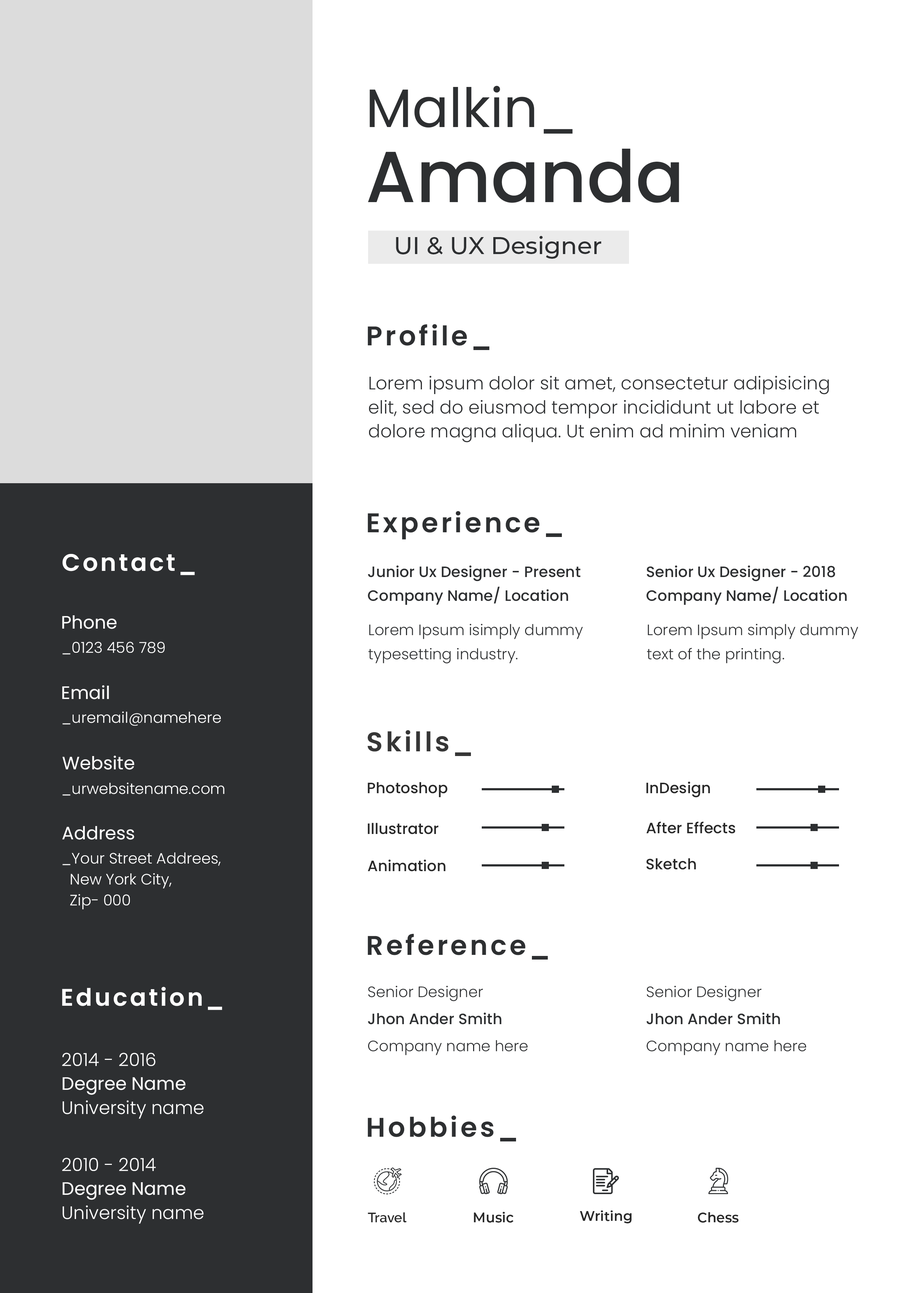
<style>
.page{position:relative;width:922px;height:1293px;background:#ffffff}
.page>*{position:absolute;margin:0}
.t1{font:54.1px/75.2px "Poppins-Regular";color:#2d2f31}
.t2{font:72.2px/75.2px "Poppins-Medium";color:#2d2f31}
.t3{font:24.1px "Montserrat-Medium";color:#2d2f31}
.t4{font:27.1px "Poppins-SemiBold";letter-spacing:0.1em;color:#2d2f31}
.t5{font:18px/24.1px "Poppins-Light";color:#2d2f31}
.t6{font:24.1px "Poppins-SemiBold";letter-spacing:0.1em;color:#ffffff}
.t7{font:15px/24.1px "Poppins-Medium";color:#2d2f31}
.t8{font:15px/24.1px "Poppins-Medium";color:#2d2f31;text-transform:uppercase}
.t9{font:18px "Poppins-Regular";color:#ffffff}
.t10{font:15px/24.1px "Poppins-Light";color:#2d2f31}
.t11{font:15px "Poppins-Light";color:#ffffff}
.t12{font:27.1px "Poppins-SemiBold";letter-spacing:0.1em;color:#363636}
.t13{font:15px "Poppins-Medium";color:#282828}
.t14{font:15px/21.1px "Poppins-Light";color:#ffffff}
.t15{font:15px/27.1px "Poppins-Light";color:#2d2f31}
.t16{font:15px/27.1px "Poppins-Medium";color:#2d2f31}
.t17{font:18px/24.1px "Poppins-Light";color:#fefefe}
.t18{font:18px/24.1px "Poppins-Regular";color:#fefefe}
.t19{font:13.5px "Raleway-SemiBold";color:#282828}
.t20{font:13.5px "Montserrat-SemiBold";color:#282828}
</style>
<div class="page">
<p class="t1" style="left:368px;top:86px;width:311px;height:117px">Malkin_<br><span class="t2">Amanda</span></p>
<p class="t3" style="left:396px;top:236px;width:205px;height:23px">UI &amp; UX Designer</p>
<p class="t4" style="left:368px;top:324px;width:121px;height:26px">Profile_</p>
<p class="t5" style="left:369px;top:376px;width:460px;height:66px">Lorem ipsum dolor sit amet, consectetur adipisicing elit, sed do eiusmod tempor incididunt ut labore et dolore magna aliqua. Ut enim ad minim veniam</p>
<p class="t4" style="left:368px;top:511px;width:194px;height:29px">Experience_</p>
<p class="t6" style="left:62px;top:554px;width:133px;height:21px">Contact_</p>
<p class="t7" style="left:368px;top:566px;width:213px;height:39px">Junior Ux Designer<span class="t8"> - </span>Present<br>Company Name/ Location</p>
<p class="t7" style="left:646px;top:566px;width:201px;height:39px">Senior Ux Designer<span class="t8"> - </span>2018<br>Company Name/ Location</p>
<p class="t9" style="left:62px;top:615px;width:55px;height:14px">Phone</p>
<p class="t10" style="left:368px;top:624px;width:215px;height:40px">Lorem Ipsum isimply dummy typesetting industry.</p>
<p class="t10" style="left:647px;top:624px;width:211px;height:40px">Lorem Ipsum simply dummy text of the printing.</p>
<p class="t11" style="left:62px;top:642px;width:103px;height:13px">_0123 456 789</p>
<p class="t9" style="left:62px;top:685px;width:47px;height:14px">Email</p>
<p class="t11" style="left:62px;top:711px;width:159px;height:15px">_uremail@namehere</p>
<p class="t12" style="left:367px;top:730px;width:104px;height:26px">Skills_</p>
<p class="t9" style="left:62px;top:756px;width:72px;height:14px">Website</p>
<p class="t11" style="left:62px;top:782px;width:162px;height:14px">_urwebsitename.com</p>
<p class="t13" style="left:368px;top:782px;width:80px;height:15px">Photoshop</p>
<p class="t13" style="left:646px;top:782px;width:64px;height:16px">InDesign</p>
<p class="t13" style="left:646px;top:821px;width:90px;height:13px">After Effects</p>
<p class="t9" style="left:62px;top:826px;width:72px;height:14px">Address</p>
<p class="t13" style="left:368px;top:823px;width:71px;height:11px">Illustrator</p>
<p class="t14" style="left:62px;top:852px;width:159px;height:57px">_Your Street Addrees,<br>  New York City,<br>  Zip- 000</p>
<p class="t13" style="left:368px;top:860px;width:78px;height:12px">Animation</p>
<p class="t13" style="left:646px;top:858px;width:50px;height:12px">Sketch</p>
<p class="t4" style="left:368px;top:934px;width:180px;height:26px">Reference_</p>
<p class="t6" style="left:62px;top:987px;width:160px;height:23px">Education_</p>
<p class="t15" style="left:368px;top:986px;width:160px;height:69px">Senior Designer<br><span class="t16">Jhon Ander Smith<br></span>Company name here</p>
<p class="t15" style="left:646px;top:986px;width:160px;height:69px">Senior Designer<br><span class="t16">Jhon Ander Smith<br></span>Company name here</p>
<p class="t17" style="left:62px;top:1053px;width:142px;height:66px">2014 - 2016<br><span class="t18">Degree Name<br></span>University name</p>
<p class="t4" style="left:368px;top:1116px;width:148px;height:26px">Hobbies_</p>
<p class="t17" style="left:62px;top:1158px;width:142px;height:66px">2010 - 2014<br><span class="t18">Degree Name<br></span>University name</p>
<p class="t19" style="left:368px;top:1212px;width:39px;height:11px">Travel</p>
<p class="t20" style="left:474px;top:1212px;width:40px;height:11px">Music</p>
<p class="t20" style="left:580px;top:1210px;width:52px;height:13px">Writing</p>
<p class="t20" style="left:698px;top:1212px;width:41px;height:11px">Chess</p>
</div>
